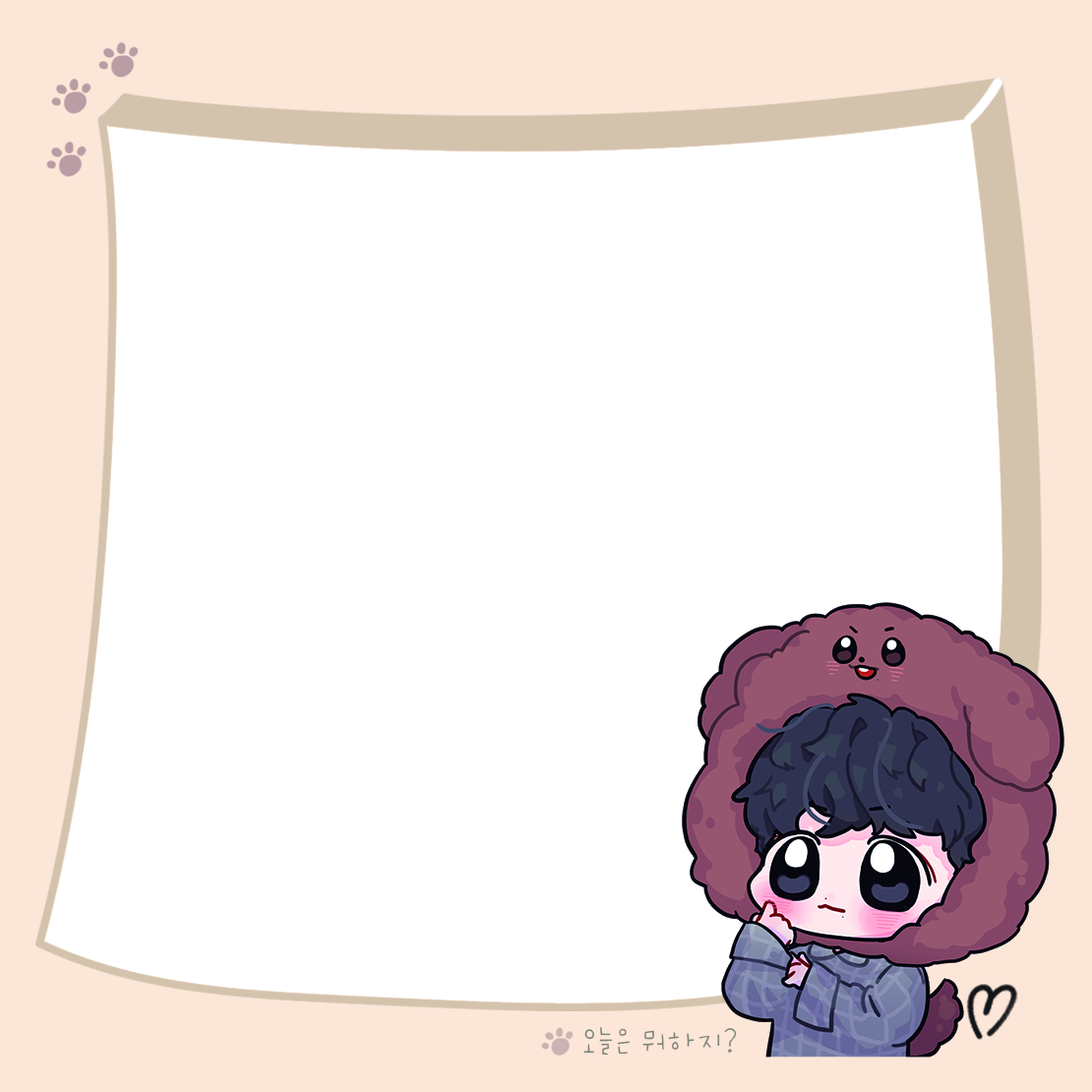
<style>
.page{position:relative;width:1092px;height:1092px;background:#ffffff}
.page>*{position:absolute;margin:0}
.t1{font:32.8px "Nanishow_1004_12";color:#7d847a}
</style>
<div class="page">
<p class="t1" style="left:583px;top:1027px;width:154px;height:29px">오늘은 뭐하지?</p>
</div>
